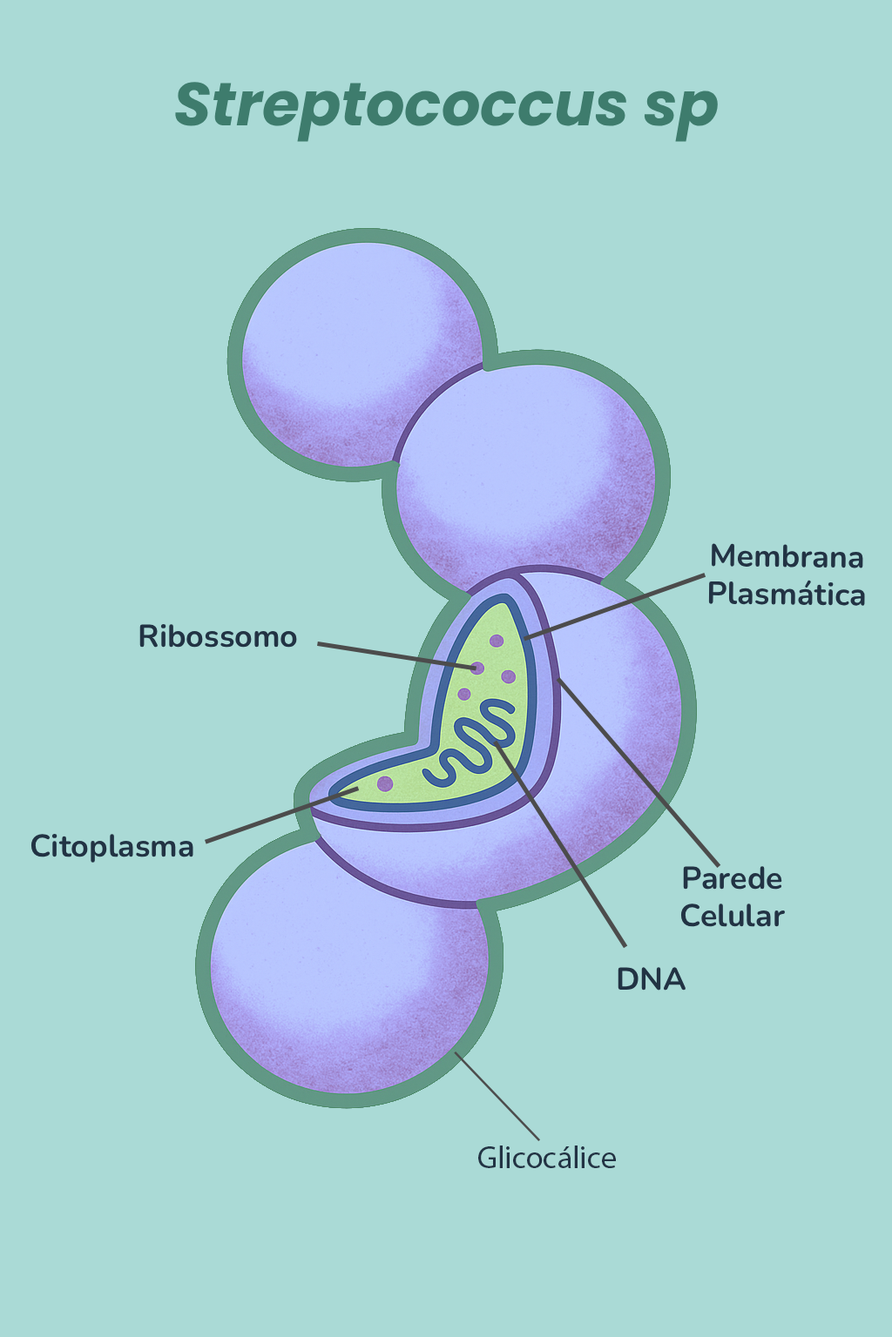
<style>
.page{position:relative;width:892px;height:1337px;background:#aadad6}
.page>*{position:absolute;margin:0}
.t1{font:60.9px "Poppins-BoldItalic";color:#3e7c6d}
.t2{font:31.3px "Nunito-Bold";color:#223344}
.t3{font:31.3px "MyriadPro-Regular";color:#223344}
</style>
<div class="page">
<p class="t1" style="left:174px;top:82px;width:545px;height:60px">Streptococcus sp</p>
<p class="t2" style="left:708px;top:543px;width:157px;height:63px;rotate:1deg">Membrana Plasmática</p>
<p class="t2" style="left:139px;top:624px;width:158px;height:24px">Ribossomo</p>
<p class="t2" style="left:30px;top:834px;width:163px;height:29px">Citoplasma</p>
<p class="t2" style="left:680px;top:866px;width:105px;height:61px;text-align:center">Parede Celular</p>
<p class="t2" style="left:617px;top:967px;width:69px;height:24px">DNA</p>
<p class="t3" style="left:478px;top:1146px;width:138px;height:22px">Glicocálice</p>
</div>
